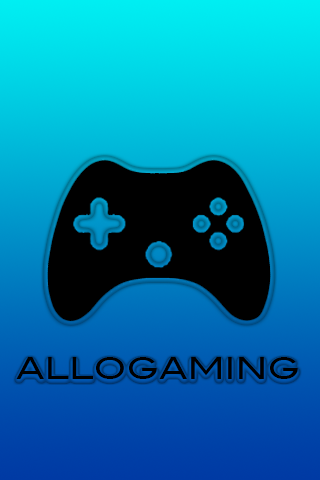
<style>
.page{position:relative;width:320px;height:480px}
.page>*{position:absolute;margin:0}
.t1{font:30px "BlairMdITCTTMedium";color:#000000}
</style>
<div class="page">
<p class="t1" style="left:16px;top:357px;width:282px;height:22px">ALLOGAMING</p>
</div>
